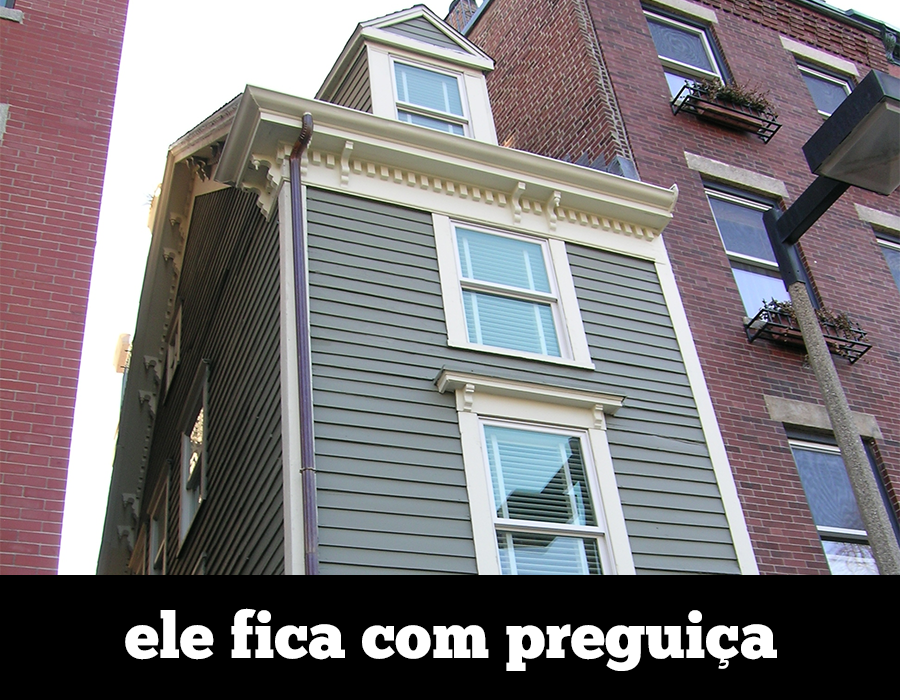
<style>
.page{position:relative;width:900px;height:700px}
.page>*{position:absolute;margin:0}
.t1{font:64px "ChunkFive-Roman";color:#ffffff}
</style>
<div class="page">
<p class="t1" style="left:125px;top:608px;width:652px;height:63px">ele fica com preguiça</p>
</div>
